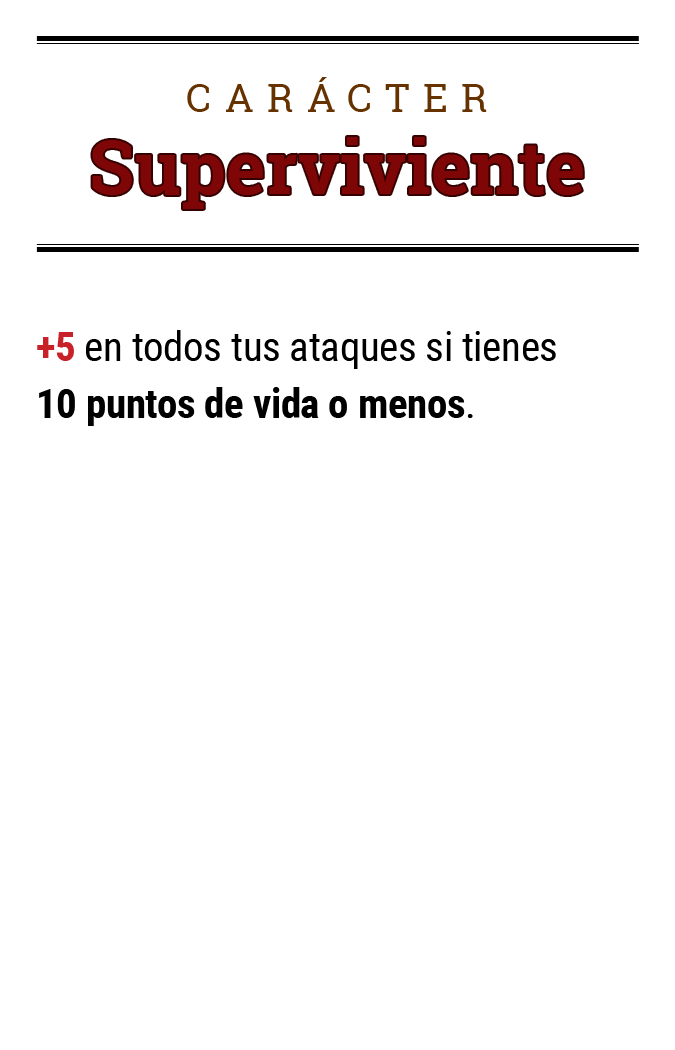
<style>
.page{position:relative;width:675px;height:1050px;background:#ffffff}
.page>*{position:absolute;margin:0}
.t1{font:39.2px "RobotoSlab-Regular";letter-spacing:0.34em;color:#663300}
.t2{font:74.5px "RobotoSlab-Bold";color:#7f0606}
.t3{font:41.1px/57.1px "RobotoCondensed-Regular";letter-spacing:-0.01em;color:#000000}
.t4{font:41.1px/57.1px "RobotoCondensed-Bold";letter-spacing:-0.01em;color:#c82127}
.t5{font:41.1px/57.1px "RobotoCondensed-Bold";letter-spacing:-0.01em;color:#000000}
</style>
<div class="page">
<p class="t1" style="left:187px;top:77px;width:300px;height:35px">CARÁCTER</p>
<p class="t2" style="left:92px;top:137px;width:491px;height:72px">Superviviente</p>
<p class="t3" style="left:37px;top:330px;width:519px;height:96px"><span class="t4">+5</span> en todos tus ataques si tienes<br><span class="t5">10 puntos de vida o menos</span>.</p>
</div>
